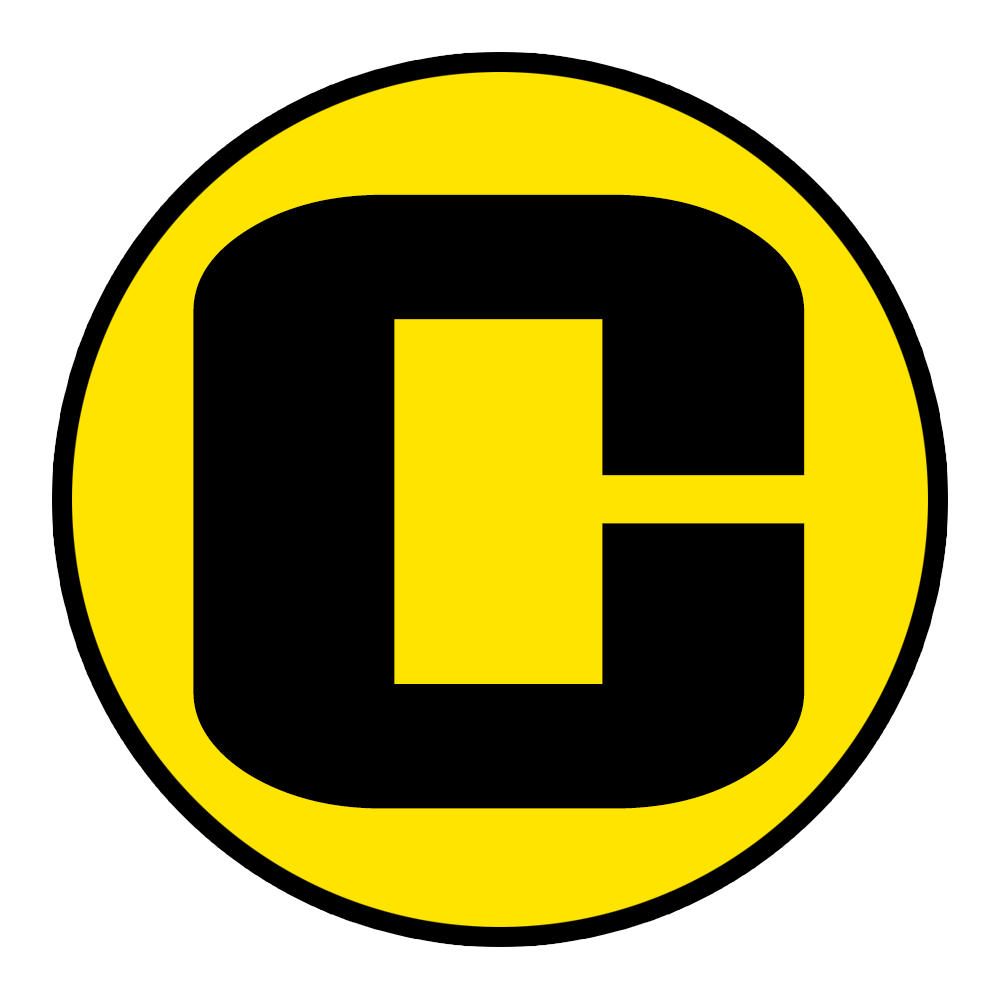
<style>
.page{position:relative;width:1000px;height:1000px;background:#ffffff}
.page>*{position:absolute;margin:0}
.t1{font:874.9px "SUPERPUNCH";letter-spacing:0.1em;color:#000000;scale:1.62 1}
</style>
<div class="page">
<p class="t1" style="left:193px;top:194px;width:612px;height:615px">C</p>
</div>
